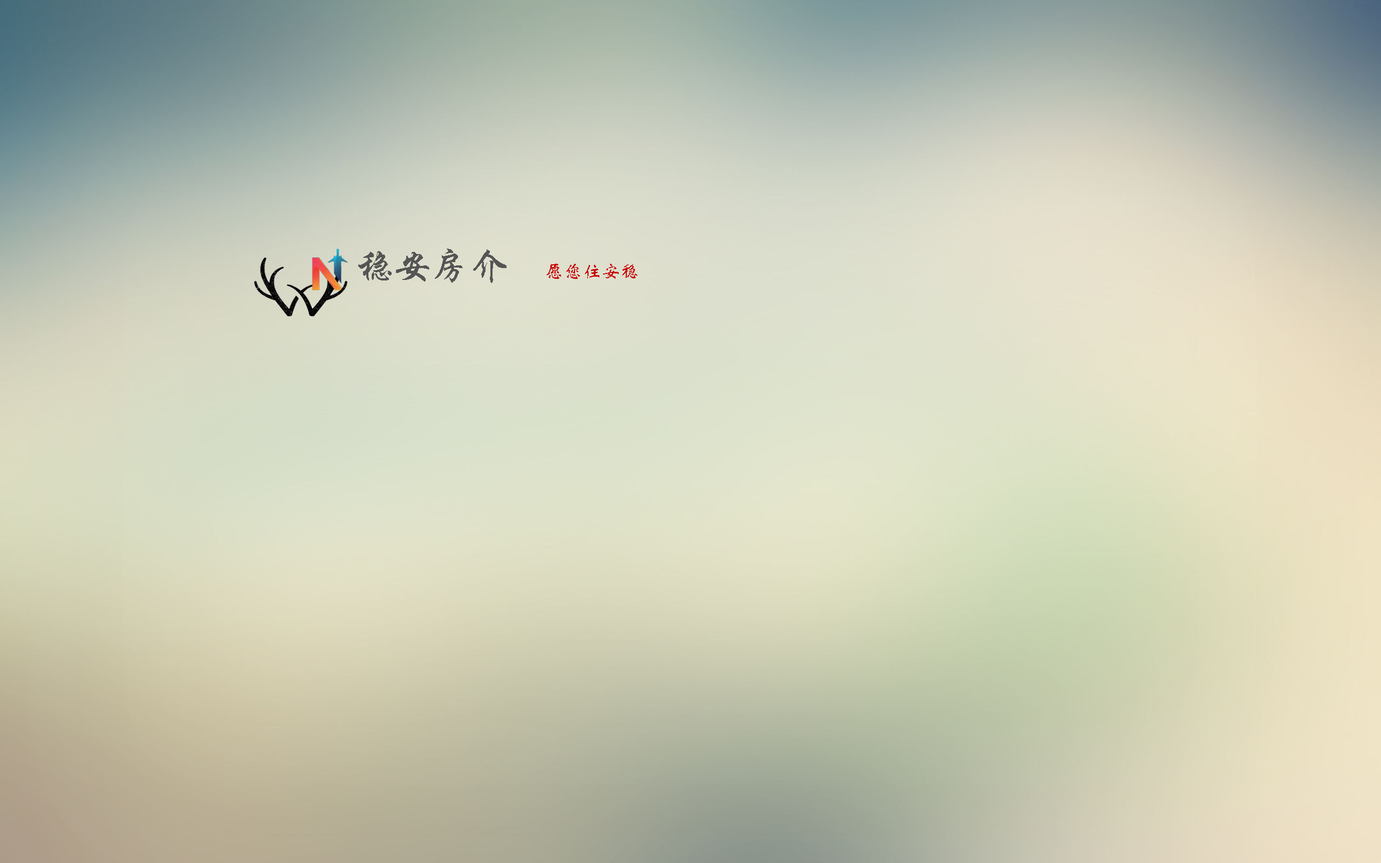
<style>
.page{position:relative;width:1381px;height:863px}
.page>*{position:absolute;margin:0}
.t1{font:18.9px "STXinwei";color:#c70909}
.t2{font:37.8px "STXingkai";color:#555555}
</style>
<div class="page">
<p class="t1" style="left:358px;top:249px;width:280px;height:34px"><span class="t2">稳安房介  </span>愿您住安稳</p>
</div>
